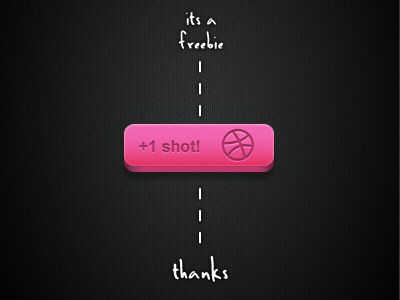
<style>
.page{position:relative;width:400px;height:300px}
.page>*{position:absolute;margin:0}
.t1{font:30px/24px "BenBrown";color:#ffffff}
.t2{font:16px "Arial-BoldMT";color:#ab305f}
.t3{font:36px "BenBrown";color:#ffffff}
</style>
<div class="page">
<p class="t1" style="left:179px;top:12px;width:44px;height:37px;text-align:center">its a<br>freebie</p>
<p class="t2" style="left:139px;top:140px;width:61px;height:13px">+1 shot!</p>
<p class="t3" style="left:172px;top:256px;width:56px;height:26px">thanks</p>
</div>
